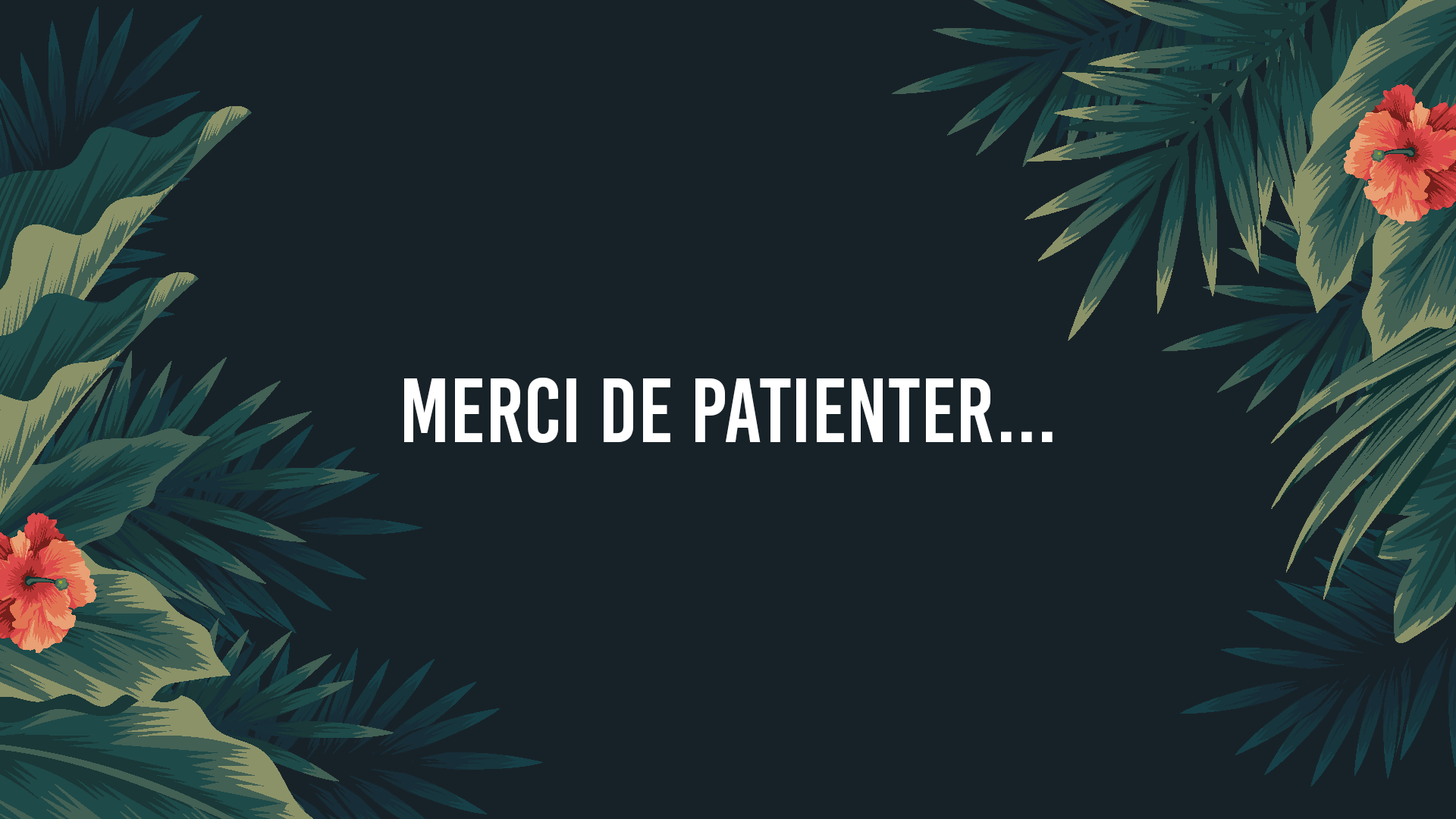
<style>
.page{position:relative;width:1456px;height:819px;background:#172228}
.page>*{position:absolute;margin:0}
.t1{font:91px "BebasKai";color:#ffffff}
</style>
<div class="page">
<p class="t1" style="left:404px;top:378px;width:649px;height:65px">Merci de patienter...</p>
</div>
